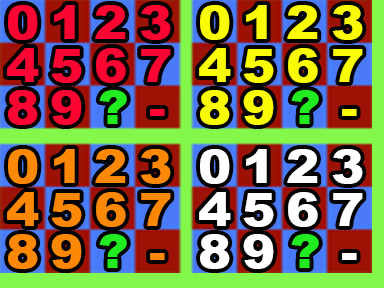
<style>
.page{position:relative;width:384px;height:288px;background:#020202}
.page>*{position:absolute;margin:0}
.t1{font:45.6px/42.8px "Arial-Black";letter-spacing:0.21em;color:#fc0533;scale:1.1 1}
.t2{font:45.6px/42.8px "Arial-Black";letter-spacing:0.21em;color:#20ec20;scale:1.1 1}
.t3{font:45.6px/42.8px "Arial-Black";letter-spacing:0.21em;color:#f9fc05;scale:1.1 1}
.t4{font:45.6px/42.8px "Arial-Black";letter-spacing:0.21em;color:#fc8805;scale:1.1 1}
.t5{font:45.6px/42.8px "Arial-Black";letter-spacing:0.21em;color:#ffffff;scale:1.1 1}
</style>
<div class="page">
<p class="t1" style="left:7px;top:5px;width:164px;height:120px">0123<br>4567<br>89 <span class="t2">? </span>-</p>
<p class="t3" style="left:199px;top:5px;width:164px;height:120px">0123<br>4567<br>89 <span class="t2">? </span>-</p>
<p class="t4" style="left:7px;top:149px;width:164px;height:120px">0123<br>4567<br>89 <span class="t2">? </span>-</p>
<p class="t5" style="left:199px;top:149px;width:164px;height:120px">0123<br>4567<br>89 <span class="t2">? </span>-</p>
</div>
